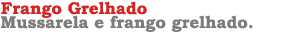
<style>
.page{position:relative;width:300px;height:50px;background:#ffffff}
.page>*{position:absolute;margin:0}
.t1{font:17px "BookmanOldStyle-Bold";color:#d42525}
.t2{font:17px "BookmanOldStyle-Bold";color:#7c7c79}
</style>
<div class="page">
<p class="t1" style="left:1px;top:1px;width:146px;height:17px">Frango Grelhado</p>
<p class="t2" style="left:1px;top:15px;width:252px;height:17px">Mussarela e frango grelhado.</p>
</div>
